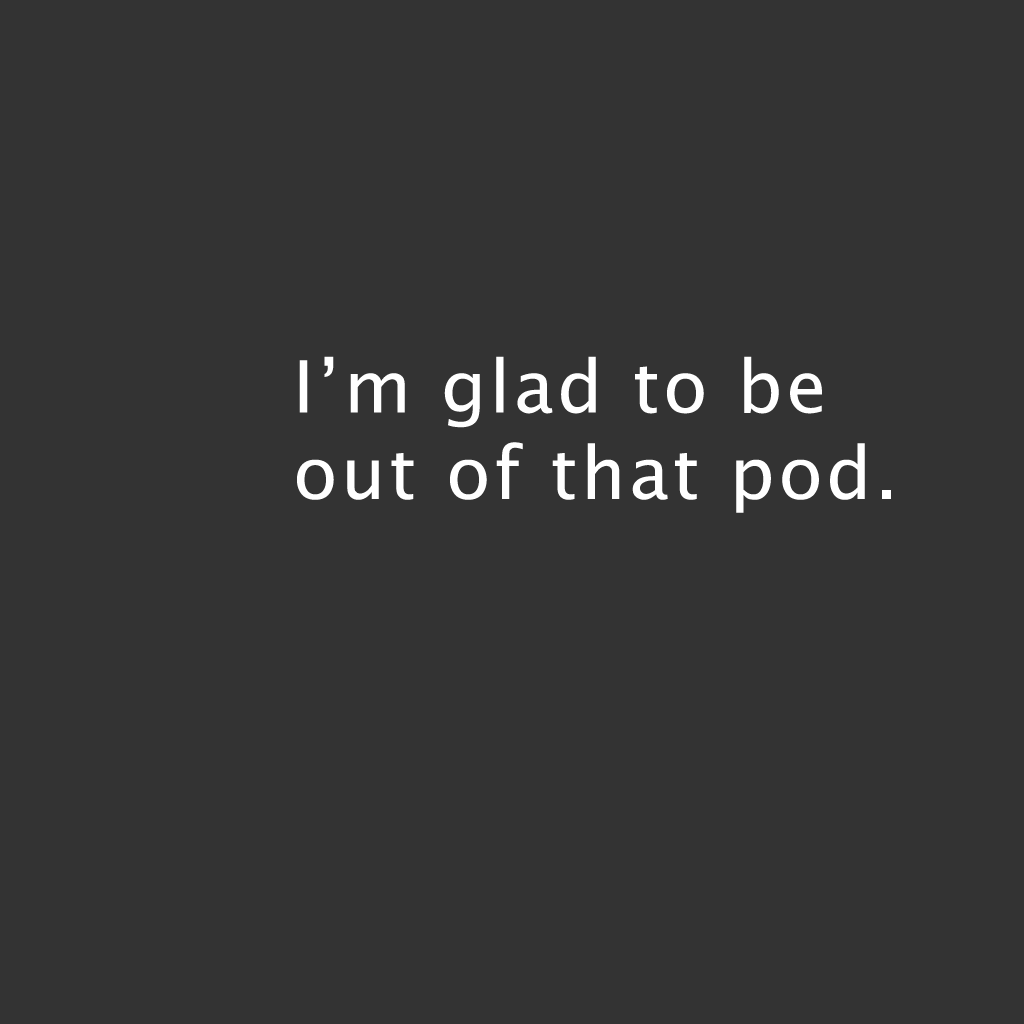
<style>
.page{position:relative;width:1024px;height:1024px;background:#333333}
.page>*{position:absolute;margin:0}
.t1{font:72px "LucidaSans";letter-spacing:0.05em;color:#ffffff}
</style>
<div class="page">
<p class="t1" style="left:297px;top:356px;width:594px;height:157px">I’m glad to be<br>out of that pod.</p>
</div>
